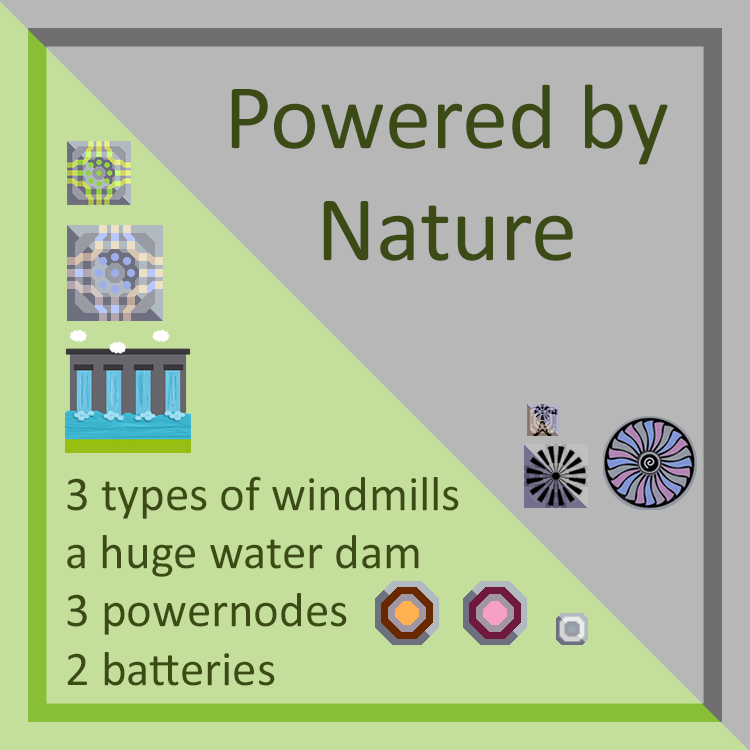
<style>
.page{position:relative;width:750px;height:750px;background:#b7b7b7}
.page>*{position:absolute;margin:0}
.t1{font:93.2px "Calibri";color:#3c4b15}
.t2{font:48.6px "Calibri";color:#3c4b15}
</style>
<div class="page">
<p class="t1" style="left:231px;top:84px;width:437px;height:177px;text-align:center">Powered by<br>Nature</p>
<p class="t2" style="left:67px;top:476px;width:392px;height:210px">3 types of windmills<br>a huge water dam<br>3 powernodes <br>2 batteries</p>
</div>
